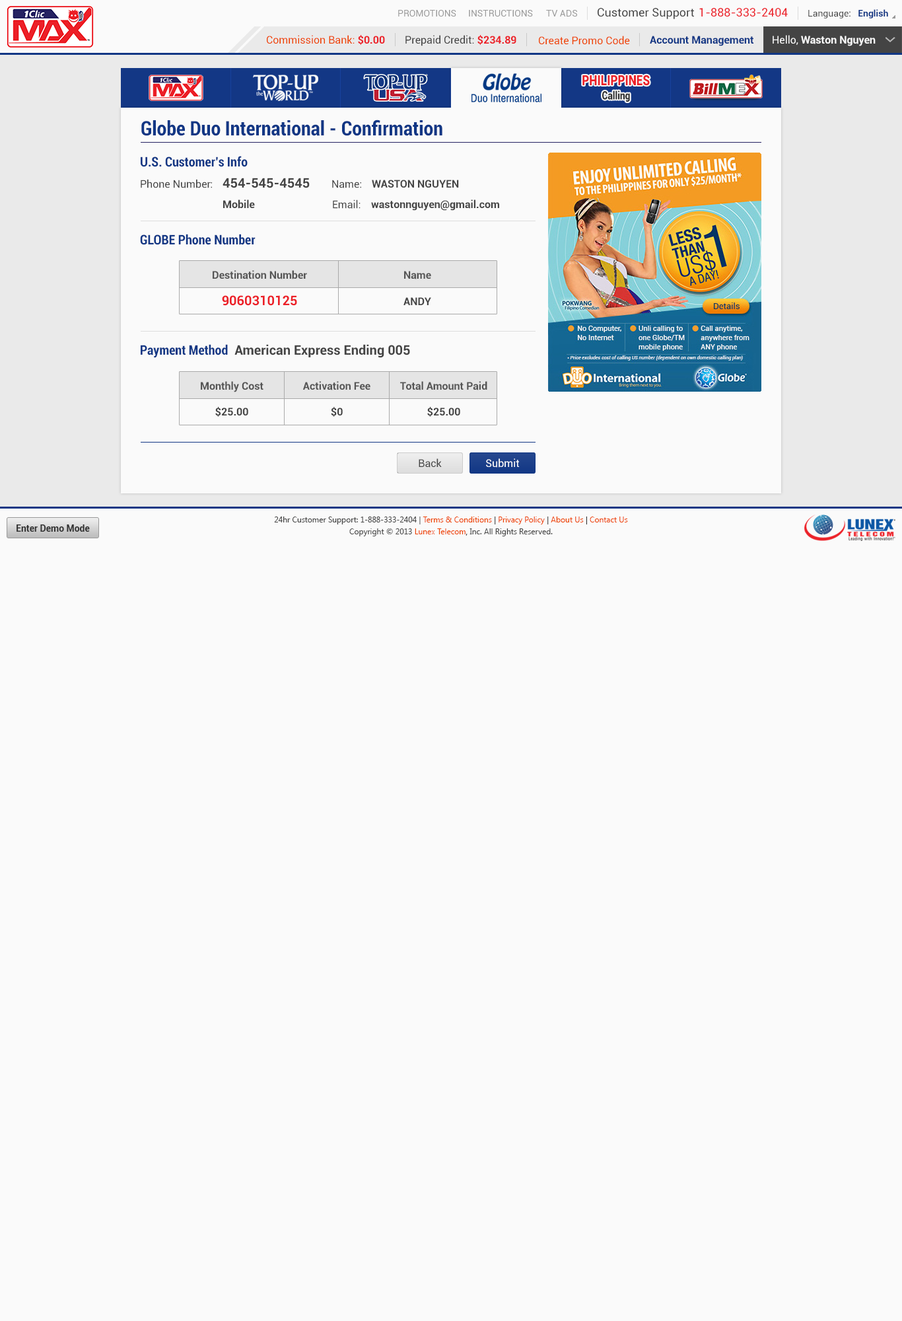
<style>
.page{position:relative;width:902px;height:1321px;background:#fafafa}
.page>*{position:absolute;margin:0}
.t1{font:9.2px "Roboto-Regular";color:#999999}
.t2{font:11.6px "Roboto-Regular";color:#444444}
.t3{font:11.6px "Roboto-Regular";color:#ec2029}
.t4{font:9.2px "Roboto-Regular";color:#444444}
.t5{font:9.2px "Roboto-Bold";color:#123785}
.t6{font:10.6px "Roboto-Regular";color:#ee4400}
.t7{font:10.6px "Roboto-Bold";color:#ec2028}
.t8{font:10.6px "Roboto-Regular";color:#444444}
.t9{font:10.6px "Roboto-Bold";color:#123785}
.t10{font:10.6px "Roboto-Bold";color:#fafafa}
.t11{font:10.6px "Roboto-Regular";color:#fafafa}
.t12{font:14.1px "Roboto-Black";color:#ec2028;scale:0.81 1}
.t13{font:11.3px "Roboto-Black";color:#333333;scale:0.81 1}
.t14{font:19.8px "Roboto-BoldCondensed";color:#123785}
.t15{font:13.2px "Roboto-BoldCondensed";color:#123785}
.t16{font:13.2px "Roboto-Bold";color:#444444}
.t17{font:10.6px "Roboto-Bold";color:#444444}
.t18{font:10.6px "Roboto-Bold";color:#555555}
.t19{font:13.2px "Roboto-Bold";color:#ec2028}
.t20{font:10.6px "Roboto-Regular";color:#ffffff}
.t21{font:7.9px/11.9px "SegoeUI";color:#444444}
.t22{font:7.9px/11.9px "SegoeUI";color:#ee4400}
.t23{font:7.9px/11.9px "SegoeUI";color:#333333}
.t24{font:9.2px "Roboto-Bold";color:#333333}
</style>
<div class="page">
<p class="t1" style="left:398px;top:10px;width:59px;height:7px">PROMOTIONS</p>
<p class="t1" style="left:469px;top:10px;width:64px;height:7px">INSTRUCTIONS</p>
<p class="t1" style="left:546px;top:10px;width:31px;height:7px">TV ADS</p>
<p class="t2" style="left:598px;top:8px;width:96px;height:11px">Customer Support</p>
<p class="t3" style="left:700px;top:8px;width:88px;height:9px">1-888-333-2404</p>
<p class="t4" style="left:809px;top:9px;width:80px;height:9px">Language:   <span class="t5">English</span></p>
<p class="t6" style="left:267px;top:35px;width:118px;height:10px">Commission Bank: <span class="t7">$0.00</span></p>
<p class="t8" style="left:406px;top:35px;width:111px;height:11px">Prepaid Credit: <span class="t7">$234.89</span></p>
<p class="t6" style="left:539px;top:36px;width:91px;height:9px">Create Promo Code</p>
<p class="t9" style="left:650px;top:36px;width:104px;height:10px">Account Management</p>
<p class="t10" style="left:773px;top:35px;width:103px;height:11px"><span class="t11">Hello, </span>Waston Nguyen</p>
<p class="t12" style="left:583px;top:75px;width:67px;height:11px">PHILIPPINES</p>
<p class="t13" style="left:603px;top:91px;width:27px;height:11px">Calling</p>
<p class="t14" style="left:141px;top:120px;width:302px;height:16px">Globe Duo International - Confirmation</p>
<p class="t15" style="left:141px;top:156px;width:107px;height:11px">U.S. Customer’s Info</p>
<p class="t8" style="left:141px;top:179px;width:71px;height:9px">Phone Number:</p>
<p class="t16" style="left:223px;top:178px;width:87px;height:10px">454-545-4545</p>
<p class="t8" style="left:332px;top:180px;width:29px;height:8px">Name:</p>
<p class="t17" style="left:372px;top:180px;width:87px;height:8px">WASTON NGUYEN</p>
<p class="t17" style="left:223px;top:200px;width:32px;height:9px">Mobile</p>
<p class="t8" style="left:333px;top:200px;width:28px;height:9px">Email:</p>
<p class="t17" style="left:371px;top:200px;width:128px;height:11px">wastonnguyen@gmail.com</p>
<p class="t15" style="left:140px;top:234px;width:116px;height:11px">GLOBE Phone Number</p>
<p class="t18" style="left:213px;top:270px;width:94px;height:9px">Destination Number</p>
<p class="t18" style="left:404px;top:271px;width:27px;height:8px">Name</p>
<p class="t19" style="left:222px;top:295px;width:75px;height:11px">9060310125</p>
<p class="t17" style="left:404px;top:297px;width:27px;height:8px">ANDY</p>
<p class="t16" style="left:141px;top:344px;width:269px;height:14px"><span class="t15">Payment Method</span>  American Express Ending 005</p>
<p class="t18" style="left:201px;top:381px;width:63px;height:11px">Monthly Cost</p>
<p class="t18" style="left:303px;top:381px;width:68px;height:9px">Activation Fee</p>
<p class="t18" style="left:400px;top:381px;width:88px;height:9px">Total Amount Paid</p>
<p class="t17" style="left:215px;top:407px;width:33px;height:10px">$25.00</p>
<p class="t17" style="left:331px;top:407px;width:12px;height:10px">$0</p>
<p class="t17" style="left:427px;top:407px;width:33px;height:10px">$25.00</p>
<p class="t8" style="left:419px;top:458px;width:23px;height:10px">Back</p>
<p class="t20" style="left:486px;top:458px;width:34px;height:10px">Submit</p>
<p class="t21" style="left:274px;top:517px;width:354px;height:19px;text-align:center">24hr Customer Support: 1-888-333-2404 | <span class="t22">Terms &amp; Conditions</span><span class="t23"> | </span><span class="t22">Privacy Policy</span><span class="t23"> | </span><span class="t22">About Us</span><span class="t23"> | </span><span class="t22">Contact Us<br></span>Copyright © 2013 <span class="t22">Lunex Telecom</span><span class="t23">,</span> Inc. All Rights Reserved.</p>
<p class="t24" style="left:17px;top:525px;width:73px;height:7px">Enter Demo Mode</p>
</div>
